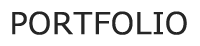
<style>
.page{position:relative;width:200px;height:46px;background:#ffffff}
.page>*{position:absolute;margin:0}
.t1{font:30px "Meiryo";color:#252525;font-weight:bold}
</style>
<div class="page">
<p class="t1" style="left:12px;top:11px;width:175px;height:24px">PORTFOLIO</p>
</div>
